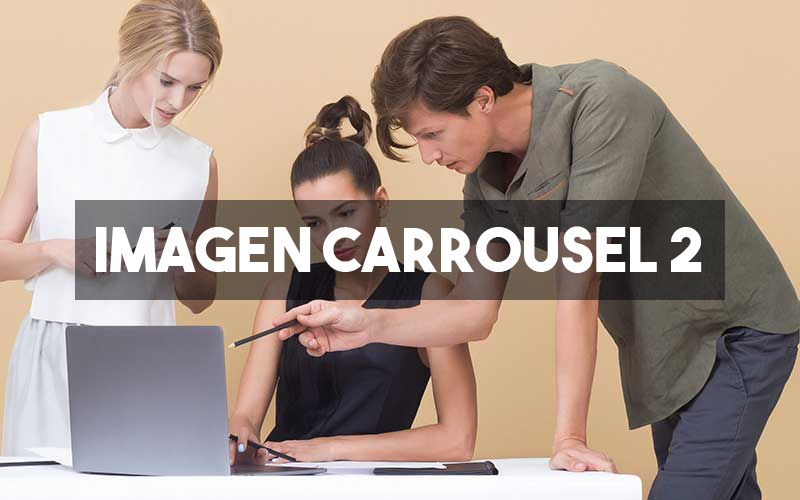
<style>
.page{position:relative;width:800px;height:500px}
.page>*{position:absolute;margin:0}
.t1{font:61.1px "TheBoldFont";color:#ffffff;text-transform:uppercase}
</style>
<div class="page">
<p class="t1" style="left:96px;top:226px;width:606px;height:47px">imagen carrousel 2</p>
</div>
